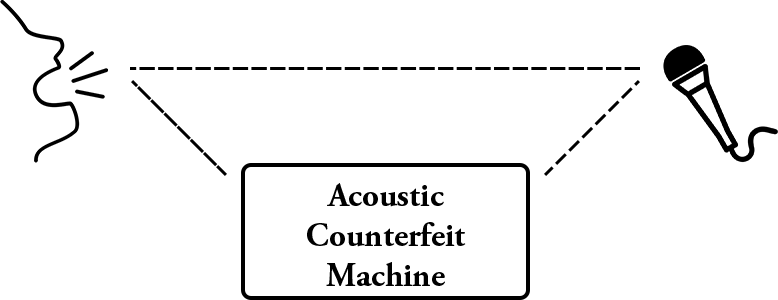
<style>
.page{position:relative;width:778px;height:300px;background:#ffffff}
.page>*{position:absolute;margin:0}
.t1{font:33.3px "AGaramondPro-Bold";color:#000000}
</style>
<div class="page">
<p class="t1" style="left:307px;top:183px;width:159px;height:103px;text-align:center">Acoustic<br>Counterfeit<br>Machine</p>
</div>
